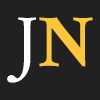
<style>
.page{position:relative;width:100px;height:100px;background:#212121}
.page>*{position:absolute;margin:0}
.t1{font:75px "CrimsonText-Regular";color:#ffffff}
.t2{font:75px "CrimsonText-Bold";color:#fcc63c}
</style>
<div class="page">
<p class="t1" style="left:7px;top:17px;width:29px;height:66px">J</p>
<p class="t2" style="left:39px;top:17px;width:54px;height:50px">N</p>
</div>
